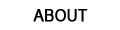
<style>
.page{position:relative;width:120px;height:30px;background:#ffffff}
.page>*{position:absolute;margin:0}
.t1{font:16.1px "ArialMT";color:#000000;font-weight:bold;scale:0.93 1}
</style>
<div class="page">
<p class="t1" style="left:33px;top:9px;width:55px;height:13px">ABOUT</p>
</div>
